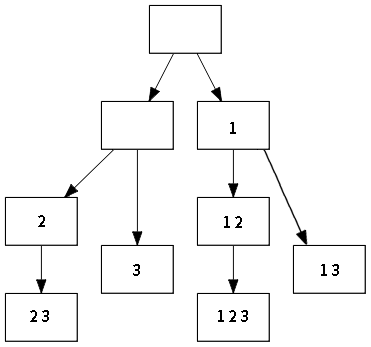
<style>
.page{position:relative;width:371px;height:347px;background:#ffffff}
.page>*{position:absolute;margin:0}
.t1{font:15px "SourceHanSansCN-Bold";color:#000000}
</style>
<div class="page">
<p class="t1" style="left:230px;top:122px;width:6px;height:12px">1</p>
<p class="t1" style="left:38px;top:215px;width:7px;height:12px">2</p>
<p class="t1" style="left:224px;top:216px;width:18px;height:12px">1 2</p>
<p class="t1" style="left:133px;top:264px;width:7px;height:12px">3</p>
<p class="t1" style="left:321px;top:264px;width:18px;height:12px">1 3</p>
<p class="t1" style="left:30px;top:310px;width:19px;height:12px">2 3</p>
<p class="t1" style="left:218px;top:310px;width:30px;height:12px">1 2 3</p>
</div>
